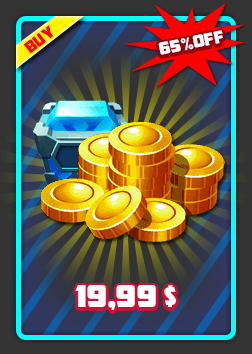
<style>
.page{position:relative;width:252px;height:354px}
.page>*{position:absolute;margin:0}
.t1{font:15.8px "AMCAPEternal";letter-spacing:-0.02em;color:#ff0000}
.t2{font:16.7px "AMCAPEternal";letter-spacing:-0.02em;color:#fefefe}
.t3{font:30px "AMCAPEternal";letter-spacing:-0.02em;color:#fefefe}
</style>
<div class="page">
<p class="t1" style="left:23px;top:24px;width:31px;height:30px;rotate:-38deg">BUY</p>
<p class="t2" style="left:158px;top:30px;width:65px;height:25px;rotate:-12deg">65%OFF</p>
<p class="t3" style="left:75px;top:285px;width:101px;height:25px">19,99 $</p>
</div>
